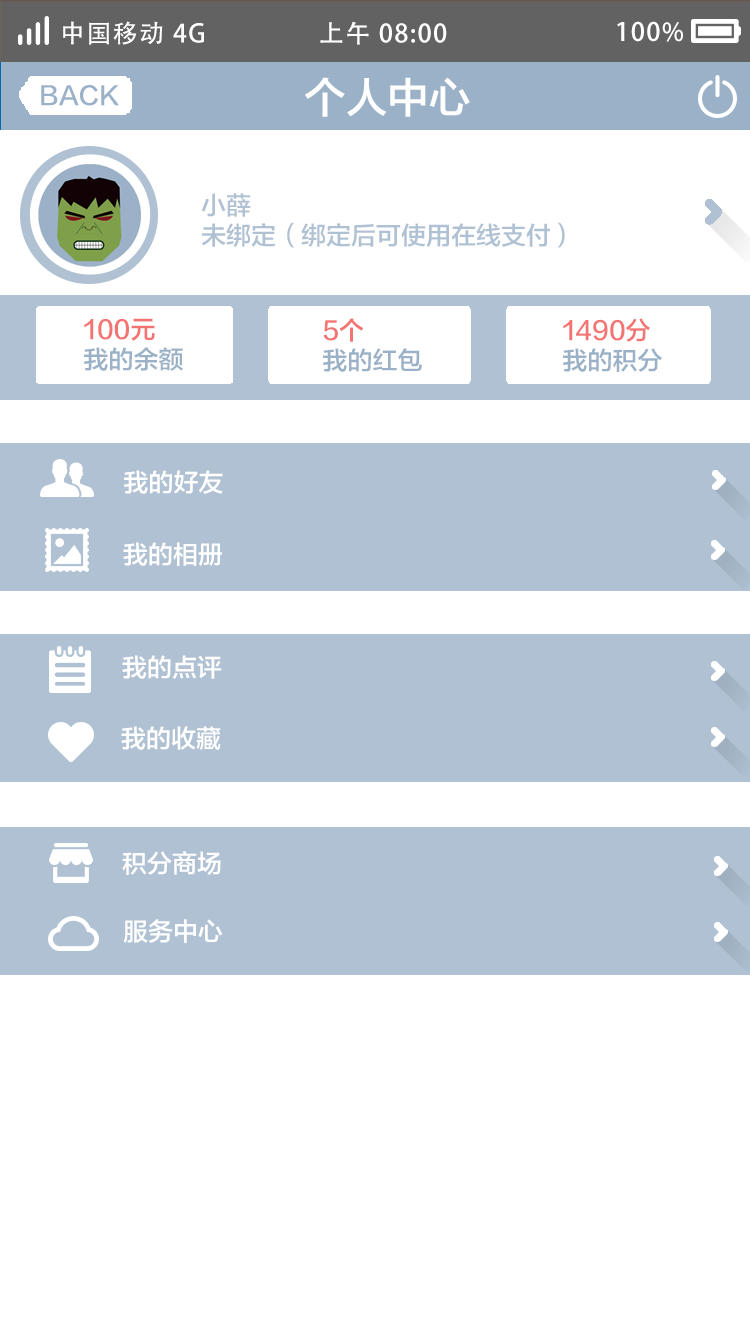
<style>
.page{position:relative;width:750px;height:1334px;background:#ffffff}
.page>*{position:absolute;margin:0}
.t1{font:25px "AdobeHeitiStd-Regular";letter-spacing:0.06em;color:#ffffff}
.t2{font:41.7px "FZLTZHK--GBK1-0";color:#ffffff;text-transform:uppercase}
.t3{font:25px "FZLTZHK--GBK1-0";color:#9bb1c8;text-transform:uppercase}
.t4{font:25px "FZLTZHK--GBK1-0";color:#afc1d3;text-transform:uppercase}
.t5{font:25px "FZLTZHK--GBK1-0";color:#f27473;text-transform:uppercase}
.t6{font:25px "FZLTZHK--GBK1-0";color:#ffffff;text-transform:uppercase}
</style>
<div class="page">
<p class="t1" style="left:63px;top:21px;width:141px;height:24px">中国移动 4G</p>
<p class="t1" style="left:320px;top:21px;width:127px;height:24px">上午 08:00</p>
<p class="t1" style="left:617px;top:21px;width:66px;height:21px">100%</p>
<p class="t2" style="left:305px;top:77px;width:165px;height:40px">个人中心</p>
<p class="t3" style="left:41px;top:84px;width:78px;height:22px">back</p>
<p class="t4" style="left:201px;top:193px;width:364px;height:55px">小薛<br>未绑定（绑定后可使用在线支付）</p>
<p class="t5" style="left:84px;top:318px;width:99px;height:53px">100元<br><span class="t3">我的余额</span></p>
<p class="t3" style="left:323px;top:318px;width:99px;height:54px"><span class="t5">5个<br></span>我的红包</p>
<p class="t5" style="left:563px;top:318px;width:99px;height:54px">1490分<br><span class="t3">我的积分</span></p>
<p class="t6" style="left:124px;top:470px;width:99px;height:24px">我的好友</p>
<p class="t6" style="left:123px;top:542px;width:99px;height:24px">我的相册</p>
<p class="t6" style="left:122px;top:655px;width:100px;height:24px">我的点评</p>
<p class="t6" style="left:121px;top:726px;width:100px;height:24px">我的收藏</p>
<p class="t6" style="left:122px;top:851px;width:99px;height:24px">积分商场</p>
<p class="t6" style="left:123px;top:919px;width:100px;height:24px">服务中心</p>
</div>
